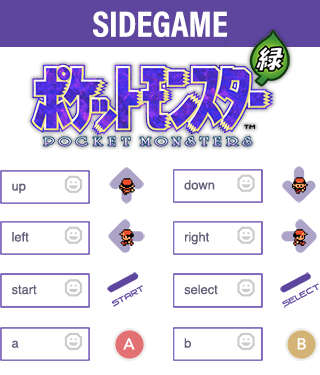
<style>
.page{position:relative;width:320px;height:375px;background:#ffffff}
.page>*{position:absolute;margin:0}
.t1{font:36.3px "AcuminProCond-Bold";color:#ffffff;text-transform:uppercase}
.t2{font:12.9px "Helvetica";color:#645f78}
.t3{font:15.8px "Avenir-Medium";color:#ffffff}
</style>
<div class="page">
<p class="t1" style="left:93px;top:11px;width:135px;height:26px">Sidegame</p>
<p class="t2" style="left:12px;top:183px;width:14px;height:11px">up</p>
<p class="t2" style="left:184px;top:180px;width:31px;height:10px">down</p>
<p class="t2" style="left:12px;top:232px;width:17px;height:10px">left</p>
<p class="t2" style="left:185px;top:232px;width:24px;height:13px">right</p>
<p class="t2" style="left:11px;top:285px;width:26px;height:10px">start</p>
<p class="t2" style="left:184px;top:284px;width:34px;height:11px">select</p>
<p class="t2" style="left:12px;top:340px;width:7px;height:8px">a</p>
<p class="t3" style="left:123px;top:338px;width:12px;height:12px">A</p>
<p class="t2" style="left:184px;top:338px;width:7px;height:10px">b</p>
<p class="t3" style="left:297px;top:338px;width:9px;height:12px">B</p>
</div>
